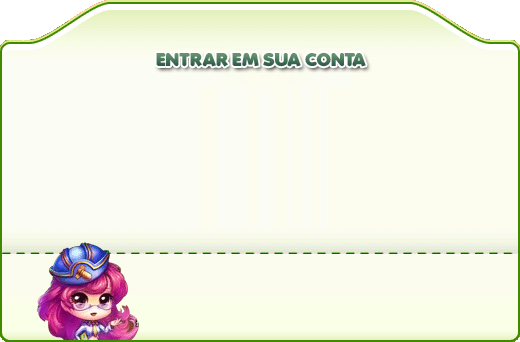
<style>
.page{position:relative;width:520px;height:342px;background:#fbfced}
.page>*{position:absolute;margin:0}
.t1{font:18px "Folks-Heavy"}
</style>
<div class="page">
<p class="t1" style="left:156px;top:52px;width:210px;height:15px">ENTRAR EM SUA CONTA</p>
</div>
